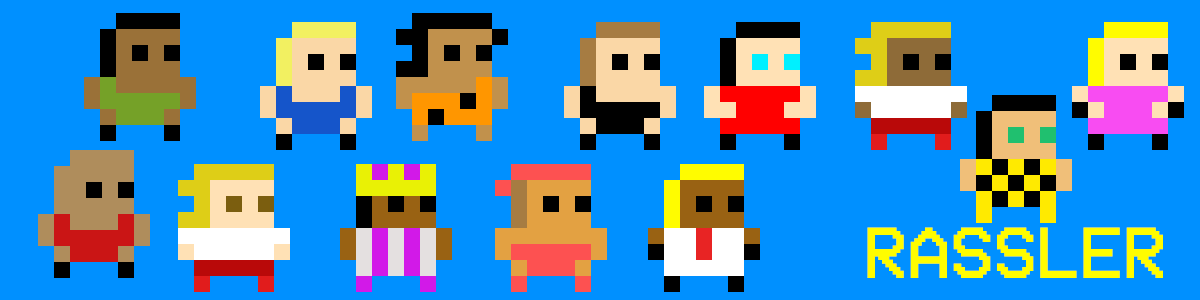
<style>
.page{position:relative;width:1200px;height:300px;background:#0090ff}
.page>*{position:absolute;margin:0}
.t1{font:72px "Camcorder-Regular";color:#fffc00}
</style>
<div class="page">
<p class="t1" style="left:867px;top:227px;width:296px;height:51px">RASSLER</p>
</div>
